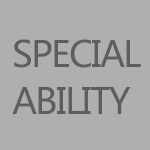
<style>
.page{position:relative;width:150px;height:150px;background:#afafaf}
.page>*{position:absolute;margin:0}
.t1{font:35.8px/47.7px "MicrosoftYaHeiUI";letter-spacing:-0.05em;color:#5e5e5e}
</style>
<div class="page">
<p class="t1" style="left:12px;top:39px;width:129px;height:75px">SPECIAL<br>ABILITY</p>
</div>
